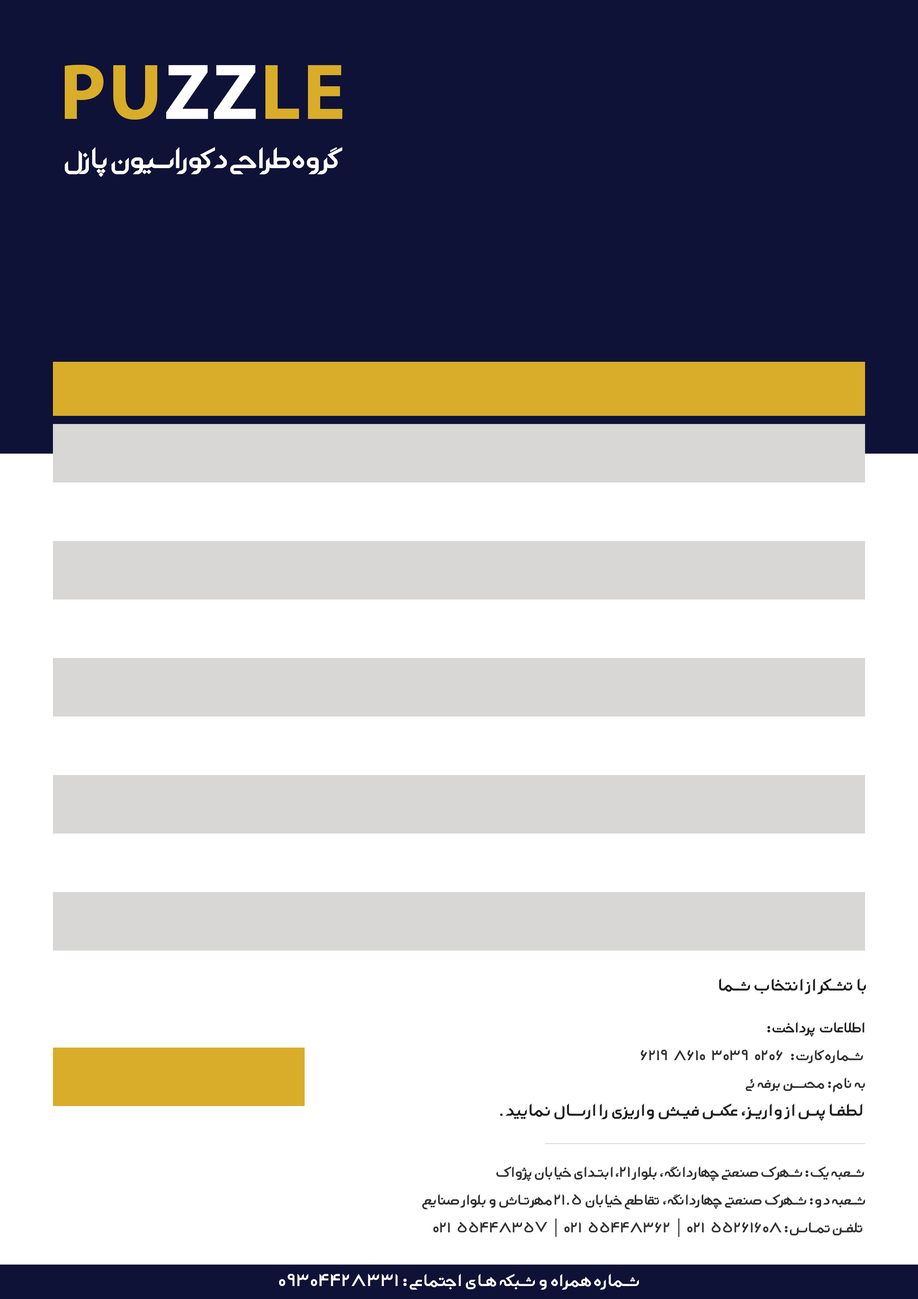
<style>
.page{position:relative;width:918px;height:1299px;background:#ffffff}
.page>*{position:absolute;margin:0}
.t1{font:79.7px "MyriadPro-Bold";letter-spacing:0.025em;color:#d9ad2a}
.t2{font:79.7px "MyriadPro-Bold";letter-spacing:0.025em;color:#ffffff}
.t3{font:37px "gaseman";color:#ffffff}
.t4{font:21.6px "gaseman";letter-spacing:0.05em;color:#222222}
.t5{font:18.5px/27.8px "gaseman";letter-spacing:0.025em;color:#333333}
.t6{font:18.5px/27.8px "gaseman";letter-spacing:0.025em;color:#222222}
.t7{font:21.6px/27.8px "gaseman";letter-spacing:0.05em;color:#222222}
.t8{font:18.5px/27.8px "MyriadPro-Regular";letter-spacing:0.025em;color:#333333}
.t9{font:21.6px "gaseman";letter-spacing:0.05em;color:#ffffff}
</style>
<div class="page">
<p class="t1" style="left:65px;top:65px;width:277px;height:55px">PU<span class="t2">ZZ</span>LE</p>
<p class="t3" style="left:65px;top:147px;width:277px;height:30px">گروه طراحی دکوراسیون پازل</p>
<p class="t4" style="left:719px;top:978px;width:147px;height:16px">با تشکر از انتخاب شما</p>
<p class="t5" style="left:500px;top:1021px;width:365px;height:100px"><span class="t6">اطلاعات پرداخت:<br></span>شماره کارت:     0206     3039     8610     6219<br>به نام: محسن برفه ئی<br><span class="t7">لطفا پس از واریز، عکس فیش واریزی را ارسال نمایید.</span></p>
<p class="t5" style="left:422px;top:1166px;width:443px;height:71px"><span class="t6"><br></span>شعبه یک: شهرک صنعتی چهاردانگه، بلوار 21، ابتدای خیابان پژواک<br>شعبه دو: شهرک صنعتی چهاردانگه، تقاطع خیابان 21.5 مهرتاش و بلوار صنایع<br>تلفن تماس: 55261608     021     <span class="t8">|</span>     55448362     021     <span class="t8">|</span>     55448357     021</p>
<p class="t9" style="left:279px;top:1274px;width:360px;height:15px">شماره همراه و شبکه های اجتماعی: 09304428331</p>
</div>
